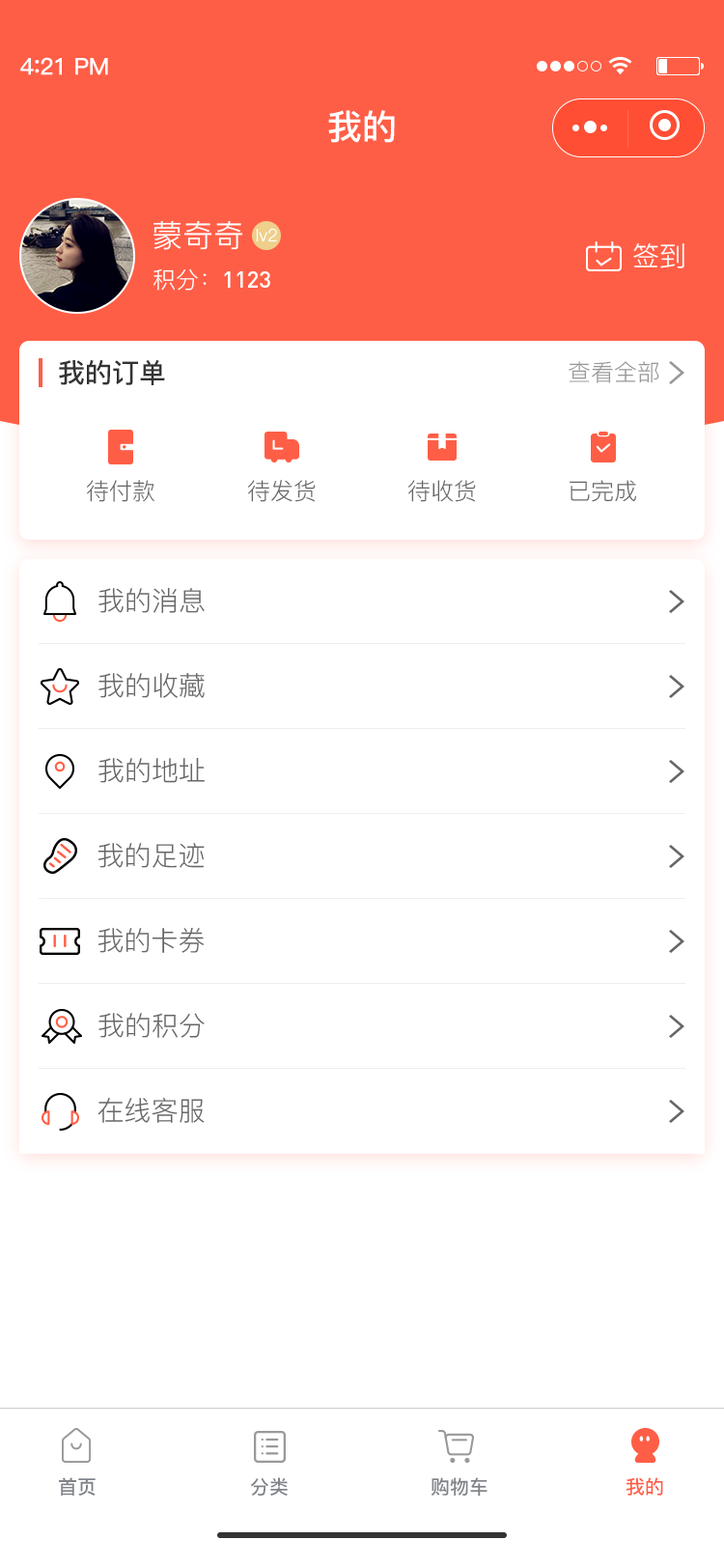
<style>
.page{position:relative;width:724px;height:1568px;background:#ffffff}
.page>*{position:absolute;margin:0}
.t1{font:23.2px "PingFang-SC-Bold";letter-spacing:-0.02em;color:#fefefe}
.t2{font:25.1px "PingFang-SC-Bold";letter-spacing:-0.02em;color:#fefefe}
.t3{font:34.8px "PingFang-SC-Bold";color:#ffffff}
.t4{font:30.9px "PingFang-SC-Regular";color:#ffffff}
.t5{font:17.4px "PingFang-SC-Regular";color:#ffffff}
.t6{font:27px "PingFang-SC-Regular";color:#ffffff}
.t7{font:23.2px "DIN-Medium";color:#ffffff}
.t8{font:23.2px "PingFang-SC-Regular";color:#ffffff}
.t9{font:27px "PingFang-SC-Bold";color:#333333}
.t10{font:23.2px "PingFang-SC-Regular";color:#999999}
.t11{font:23.2px "PingFang-SC-Regular";color:#666666}
.t12{font:27px "PingFang-SC-Regular";color:#666666}
.t13{font:19.3px "PingFang-SC-Bold";color:#7f8389}
.t14{font:19.3px "PingFang-SC-Bold";color:#ff5e46}
</style>
<div class="page">
<p class="t1" style="left:20px;top:57px;width:88px;height:18px">4<span class="t2">:</span>21 PM</p>
<p class="t3" style="left:328px;top:110px;width:67px;height:33px">我的</p>
<p class="t4" style="left:154px;top:220px;width:89px;height:30px">蒙奇奇</p>
<p class="t5" style="left:256px;top:228px;width:21px;height:14px">lv2</p>
<p class="t6" style="left:633px;top:243px;width:52px;height:25px">签到</p>
<p class="t7" style="left:154px;top:268px;width:116px;height:23px"><span class="t8">积分：</span>1123</p>
<p class="t9" style="left:59px;top:359px;width:106px;height:26px">我的订单</p>
<p class="t10" style="left:569px;top:361px;width:90px;height:22px">查看全部</p>
<p class="t11" style="left:87px;top:480px;width:67px;height:22px">待付款</p>
<p class="t11" style="left:248px;top:480px;width:68px;height:22px">待发货</p>
<p class="t11" style="left:408px;top:480px;width:68px;height:22px">待收货</p>
<p class="t11" style="left:570px;top:480px;width:66px;height:22px">已完成</p>
<p class="t12" style="left:98px;top:587px;width:107px;height:26px">我的消息</p>
<p class="t12" style="left:98px;top:673px;width:107px;height:25px">我的收藏</p>
<p class="t12" style="left:98px;top:757px;width:107px;height:26px">我的地址</p>
<p class="t12" style="left:98px;top:843px;width:107px;height:25px">我的足迹</p>
<p class="t12" style="left:98px;top:928px;width:107px;height:25px">我的卡券</p>
<p class="t12" style="left:98px;top:1013px;width:107px;height:25px">我的积分</p>
<p class="t12" style="left:98px;top:1098px;width:107px;height:25px">在线客服</p>
<p class="t13" style="left:59px;top:1477px;width:37px;height:19px">首页</p>
<p class="t13" style="left:250px;top:1477px;width:38px;height:19px">分类</p>
<p class="t13" style="left:432px;top:1477px;width:56px;height:20px">购物车</p>
<p class="t14" style="left:627px;top:1477px;width:36px;height:19px">我的</p>
</div>
